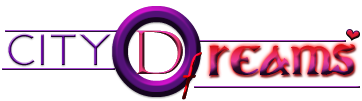
<style>
.page{position:relative;width:362px;height:101px;background:#ffffff}
.page>*{position:absolute;margin:0}
.t1{font:113.3px "MetroModern"}
.t2{font:60px "FelixTitlingMT"}
.t3{font:46.7px "AboveDEMO-Regular"}
.t4{font:66.7px "Menuetscript"}
.t5{font:40px "ElementaryGothicBookhand"}
.t6{font:40px "Balmy"}
</style>
<div class="page">
<p class="t1" style="left:112px;top:6px;width:89px;height:91px">O</p>
<p class="t2" style="left:136px;top:30px;width:47px;height:44px">D</p>
<p class="t3" style="left:8px;top:33px;width:103px;height:33px">City</p>
<p class="t4" style="left:182px;top:52px;width:20px;height:48px">f</p>
<p class="t5" style="left:209px;top:44px;width:146px;height:32px"><span class="t6"> </span>reams</p>
</div>
